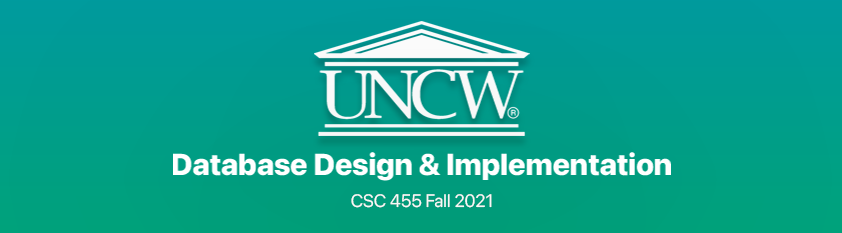
<style>
.page{position:relative;width:842px;height:233px}
.page>*{position:absolute;margin:0}
.t1{font:30px "SFPro-Heavy";color:#ffffff}
.t2{font:18px "SFPro-Regular";color:#f8f8f8}
</style>
<div class="page">
<p class="t1" style="left:173px;top:152px;width:498px;height:29px">Database Design &amp; Implementation</p>
<p class="t2" style="left:351px;top:194px;width:141px;height:14px">CSC 455 Fall 2021</p>
</div>
